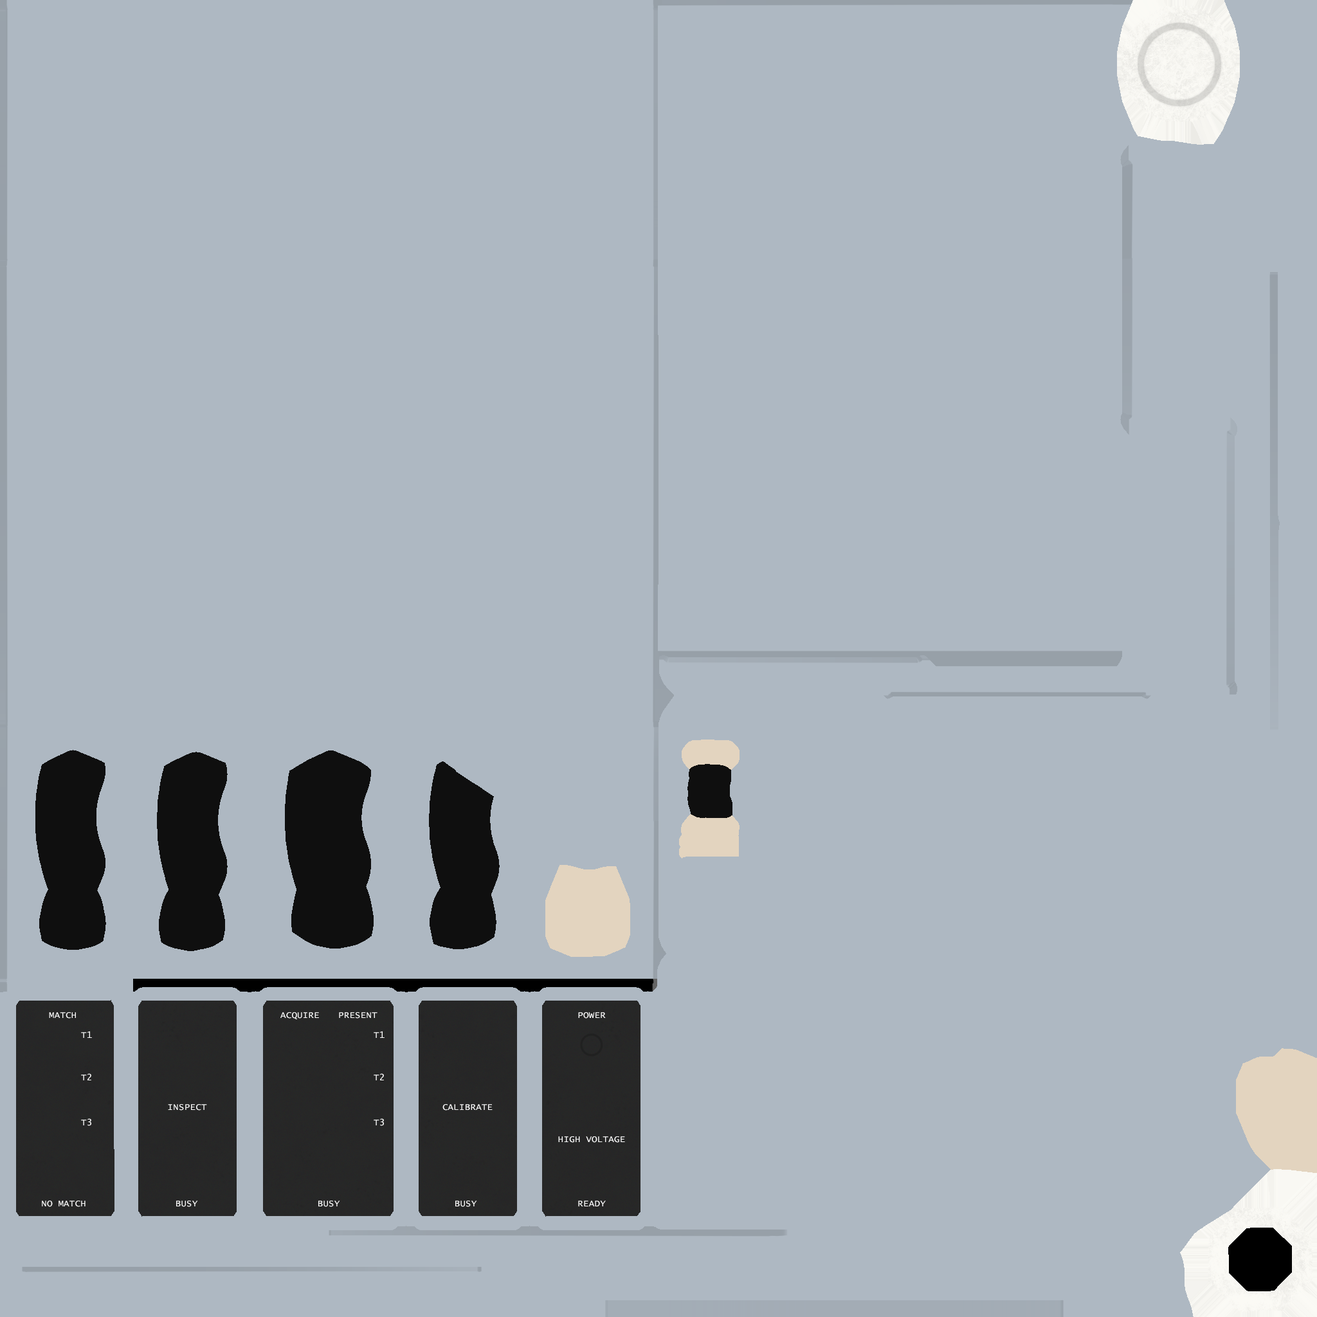
<style>
.page{position:relative;width:1317px;height:1317px;background:#aeb8c2}
.page>*{position:absolute;margin:0}
.t1{font:9px "LucidaConsole";letter-spacing:0.02em;color:#ffffff;text-transform:uppercase}
</style>
<div class="page">
<p class="t1" style="left:49px;top:1012px;width:27px;height:6px">MATCH</p>
<p class="t1" style="left:280px;top:1012px;width:39px;height:8px">ACQUIRE</p>
<p class="t1" style="left:339px;top:1012px;width:38px;height:6px">PRESENT</p>
<p class="t1" style="left:578px;top:1012px;width:28px;height:6px">POWER</p>
<p class="t1" style="left:81px;top:1030px;width:11px;height:8px">T1</p>
<p class="t1" style="left:374px;top:1030px;width:10px;height:8px">T1</p>
<p class="t1" style="left:81px;top:1073px;width:10px;height:7px">T2</p>
<p class="t1" style="left:374px;top:1073px;width:10px;height:7px">T2</p>
<p class="t1" style="left:168px;top:1104px;width:39px;height:6px">INSPECT</p>
<p class="t1" style="left:442px;top:1104px;width:50px;height:6px">CALIBRATE</p>
<p class="t1" style="left:81px;top:1118px;width:10px;height:8px">T3</p>
<p class="t1" style="left:374px;top:1118px;width:10px;height:8px">T3</p>
<p class="t1" style="left:558px;top:1136px;width:67px;height:6px">HIGH VOLTAGE</p>
<p class="t1" style="left:42px;top:1200px;width:44px;height:7px">NO MATCH</p>
<p class="t1" style="left:176px;top:1200px;width:22px;height:7px">BUSY</p>
<p class="t1" style="left:318px;top:1200px;width:22px;height:7px">BUSY</p>
<p class="t1" style="left:455px;top:1200px;width:22px;height:7px">BUSY</p>
<p class="t1" style="left:578px;top:1200px;width:28px;height:6px">READY</p>
</div>
